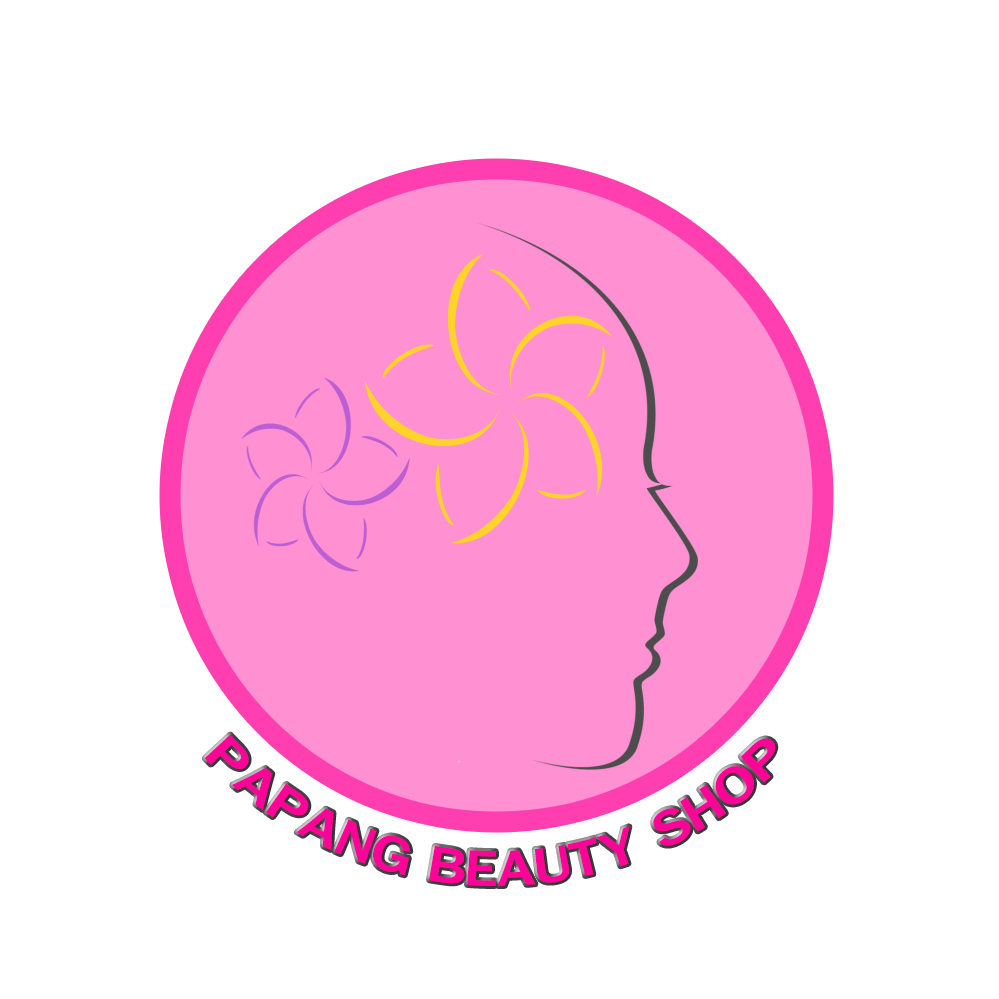
<style>
.page{position:relative;width:999px;height:999px;background:#ffffff}
.page>*{position:absolute;margin:0}
.t1{font:60px "XDB-SathornMedium";color:#ff0297}
</style>
<div class="page">
<p class="t1" style="left:204px;top:734px;width:572px;height:152px">PAPANG BEAUTY SHOP</p>
</div>
